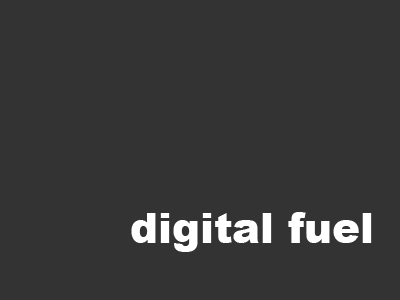
<style>
.page{position:relative;width:400px;height:300px;background:#333333}
.page>*{position:absolute;margin:0}
.t1{font:41.7px "Arial-Black";color:#ffffff}
</style>
<div class="page">
<p class="t1" style="left:131px;top:212px;width:241px;height:40px">digital fuel</p>
</div>
